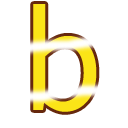
<style>
.page{position:relative;width:128px;height:128px;background:#ffffff}
.page>*{position:absolute;margin:0}
.t1{font:132.9px "SourceHanSansCN-Regular";color:#fbe417}
</style>
<div class="page">
<p class="t1" style="left:33px;top:4px;width:64px;height:108px">b</p>
</div>
